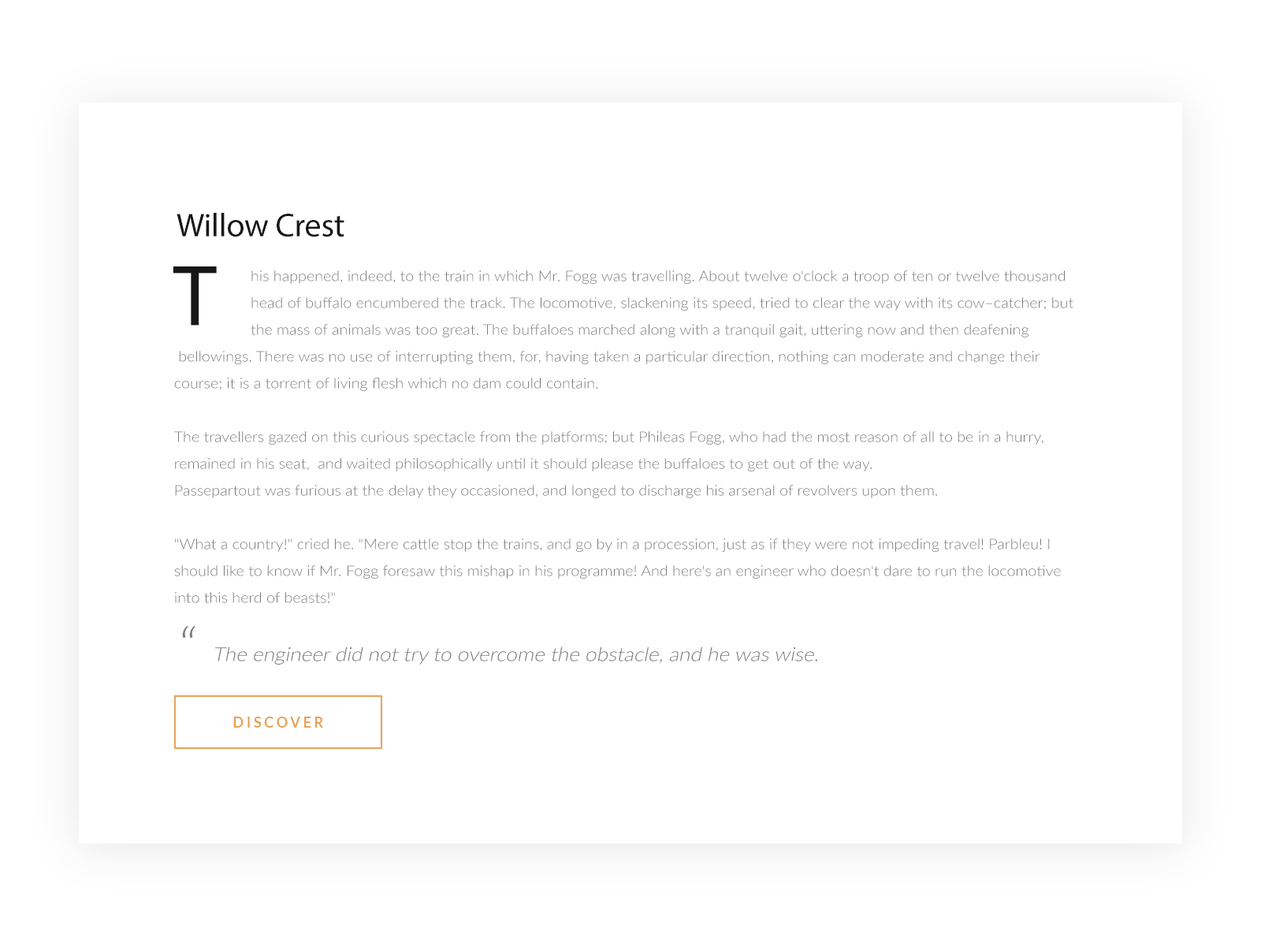
<style>
.page{position:relative;width:1261px;height:946px;background:#ffffff}
.page>*{position:absolute;margin:0}
.t1{font:33.1px "MyriadPro-Regular";letter-spacing:-0.005em;color:#171717}
.t2{font:86.7px "MyriadPro-Regular";letter-spacing:-0.005em;color:#171717}
.t3{font:14.2px/26.8px "Lato-Light";letter-spacing:-0.005em;color:#7a7a7a;scale:1.1 1}
.t4{font:47.3px/31.5px "Lato-Light";letter-spacing:-0.005em;color:#7a7a7a;font-style:italic;scale:1.1 1}
.t5{font:18.9px/26.8px "Lato-Light";letter-spacing:-0.005em;color:#7a7a7a;font-style:italic;scale:1.1 1}
.t6{font:14.2px "Lato-Bold";letter-spacing:0.2em;color:#eaa258;text-transform:uppercase}
</style>
<div class="page">
<p class="t1" style="left:177px;top:213px;width:167px;height:24px">Willow Crest</p>
<p class="t2" style="left:173px;top:266px;width:44px;height:59px">T</p>
<p class="t3" style="left:174px;top:270px;width:899px;height:394px">his happened, indeed, to the train in which Mr. Fogg was travelling. About twelve o'clock a troop of ten or twelve thousand head of buffalo encumbered the track. The locomotive, slackening its speed, tried to clear the way with its cow–catcher; but the mass of animals was too great. The buffaloes marched along with a tranquil gait, uttering now and then deafening<br> bellowings. There was no use of interrupting them, for, having taken a particular direction, nothing can moderate and change their course; it is a torrent of living flesh which no dam could contain.<br><br>The travellers gazed on this curious spectacle from the platforms; but Phileas Fogg, who had the most reason of all to be in a hurry, remained in his seat,  and waited philosophically until it should please the buffaloes to get out of the way.<br>Passepartout was furious at the delay they occasioned, and longed to discharge his arsenal of revolvers upon them.<br><br>"What a country!" cried he. "Mere cattle stop the trains, and go by in a procession, just as if they were not impeding travel! Parbleu! I should like to know if Mr. Fogg foresaw this mishap in his programme! And here's an engineer who doesn't dare to run the locomotive into this herd of beasts!"<br><br><span class="t4">“     </span><span class="t5">The engineer did not try to overcome the obstacle, and he was wise.</span></p>
<p class="t6" style="left:233px;top:716px;width:90px;height:11px">Discover</p>
</div>
